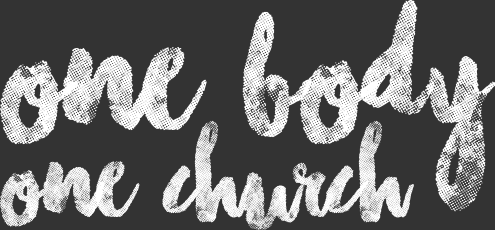
<style>
.page{position:relative;width:495px;height:230px;background:#333333}
.page>*{position:absolute;margin:0}
.t1{font:205.9px "ChasingEmbersTwo";letter-spacing:-0.01em;color:#ffffff}
.t2{font:138.4px "ChasingEmbersTwo";letter-spacing:-0.01em;color:#ffffff}
</style>
<div class="page">
<p class="t1" style="left:0px;top:0px;width:496px;height:212px">one body</p>
<p class="t2" style="left:0px;top:120px;width:414px;height:111px">one church</p>
</div>
